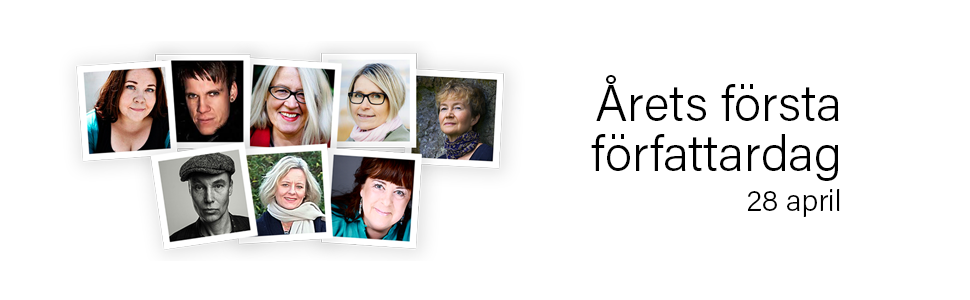
<style>
.page{position:relative;width:970px;height:300px;background:#ffffff}
.page>*{position:absolute;margin:0}
.t1{font:50px/50px "AcuminPro-Light";color:#000000}
.t2{font:30px/40px "AcuminPro-Light";color:#000000}
.t3{font:30px/33px "AcuminPro-Light";color:#000000}
</style>
<div class="page">
<p class="t1" style="left:591px;top:75px;width:249px;height:142px;text-align:right">Årets första<br>författardag<br><span class="t2">2</span><span class="t3">8 april</span></p>
</div>
